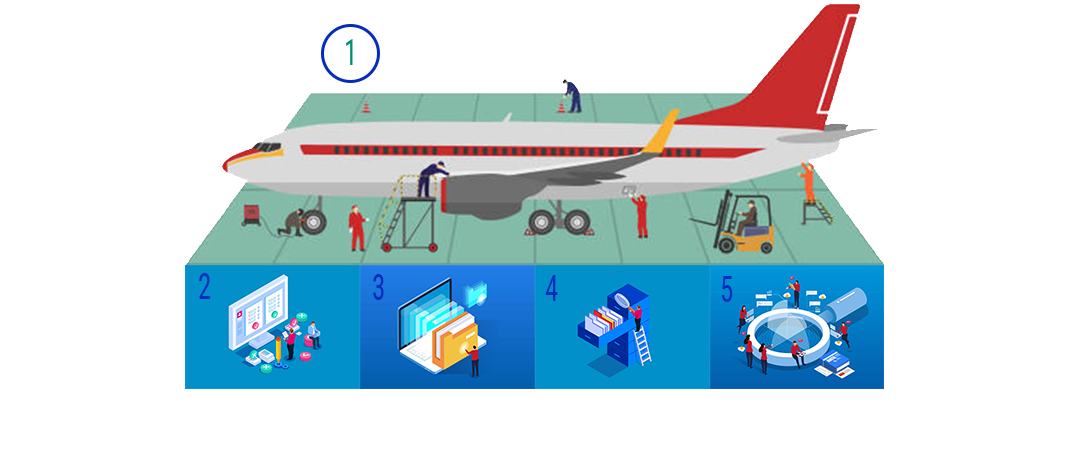
<style>
.page{position:relative;width:1070px;height:450px;background:#ffffff}
.page>*{position:absolute;margin:0}
.t1{font:36px "RobotoCondensed-Regular";color:#00926d;scale:0.74 1}
.t2{font:36px "RobotoCondensed-Regular";color:#062cbd;scale:0.74 1}
</style>
<div class="page">
<p class="t1" style="left:346px;top:39px;width:7px;height:26px">1</p>
<p class="t2" style="left:199px;top:273px;width:12px;height:26px">2</p>
<p class="t2" style="left:373px;top:274px;width:11px;height:26px">3</p>
<p class="t2" style="left:545px;top:275px;width:13px;height:26px">4</p>
<p class="t2" style="left:721px;top:276px;width:12px;height:26px">5</p>
</div>
